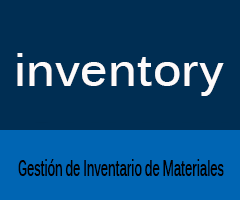
<style>
.page{position:relative;width:240px;height:200px;background:#002e53}
.page>*{position:absolute;margin:0}
.t1{font:45.4px "Kalinga-Bold";color:#fdfafa}
.t2{font:22.6px "Kalinga-Bold";color:#000000;scale:0.52 1}
</style>
<div class="page">
<p class="t1" style="left:17px;top:53px;width:207px;height:43px">inventory</p>
<p class="t2" style="left:18px;top:159px;width:206px;height:17px">Gestión de Inventario de Materiales</p>
</div>
